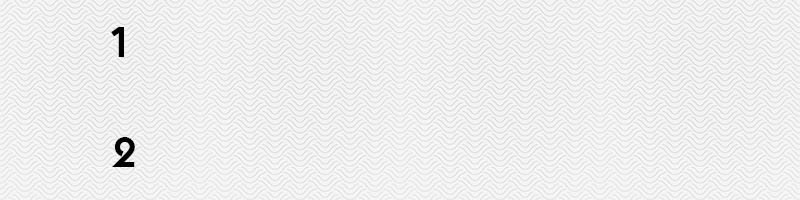
<style>
.page{position:relative;width:800px;height:200px}
.page>*{position:absolute;margin:0}
.t1{font:48px "AvernusURW-Bol";color:#000000}
</style>
<div class="page">
<p class="t1" style="left:111px;top:27px;width:13px;height:30px">1</p>
<p class="t1" style="left:112px;top:137px;width:23px;height:30px">2</p>
</div>
